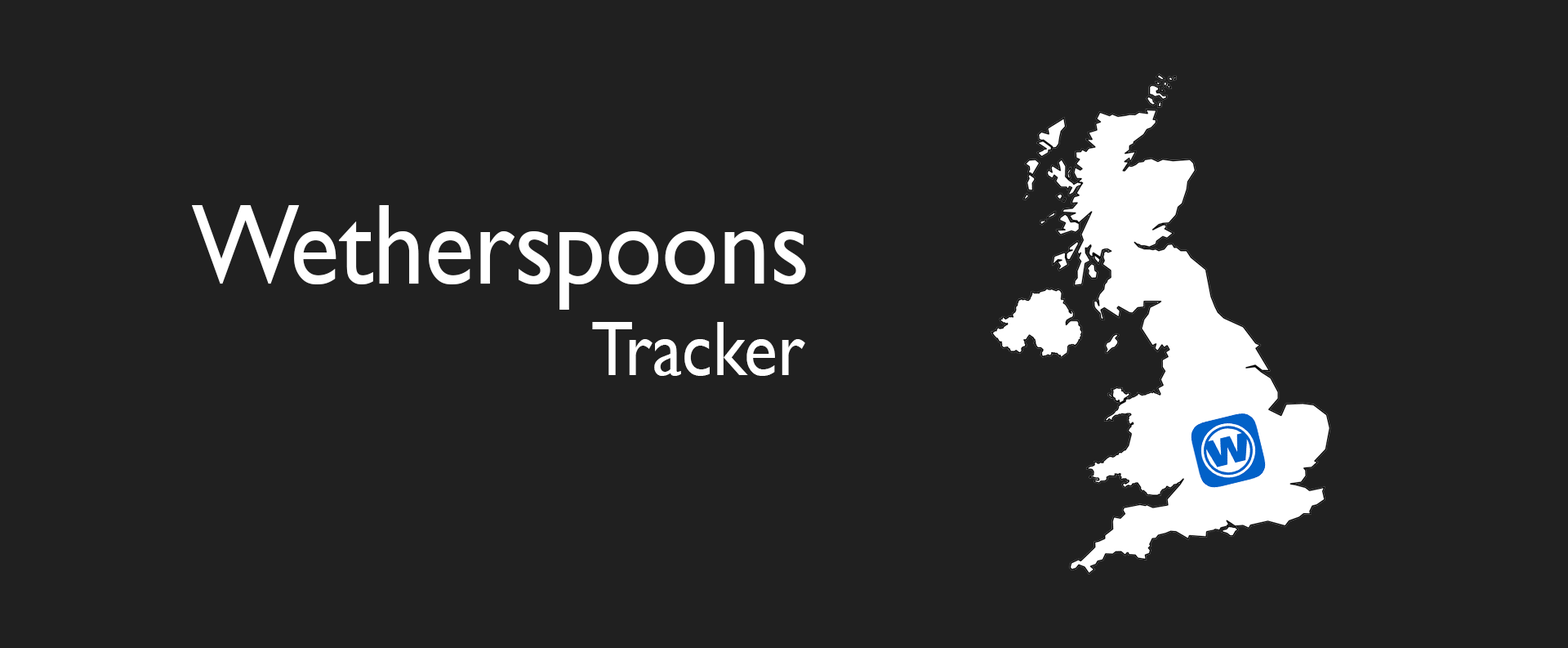
<style>
.page{position:relative;width:1568px;height:648px;background:#202020}
.page>*{position:absolute;margin:0}
.t1{font:114.1px "GillSansMT";color:#ffffff;scale:0.9 1}
.t2{font:77.8px "GillSansMT";color:#ffffff;scale:0.9 1}
</style>
<div class="page">
<p class="t1" style="left:191px;top:205px;width:615px;height:105px">Wetherspoons</p>
<p class="t2" style="left:592px;top:322px;width:213px;height:54px">Tracker</p>
</div>
